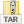
<style>
.page{position:relative;width:24px;height:24px;background:#ffffff}
.page>*{position:absolute;margin:0}
.t1{font:7px "MeiryoUI-Bold";color:#64635e}
</style>
<div class="page">
<p class="t1" style="left:3px;top:16px;width:15px;height:7px">TAR</p>
</div>
